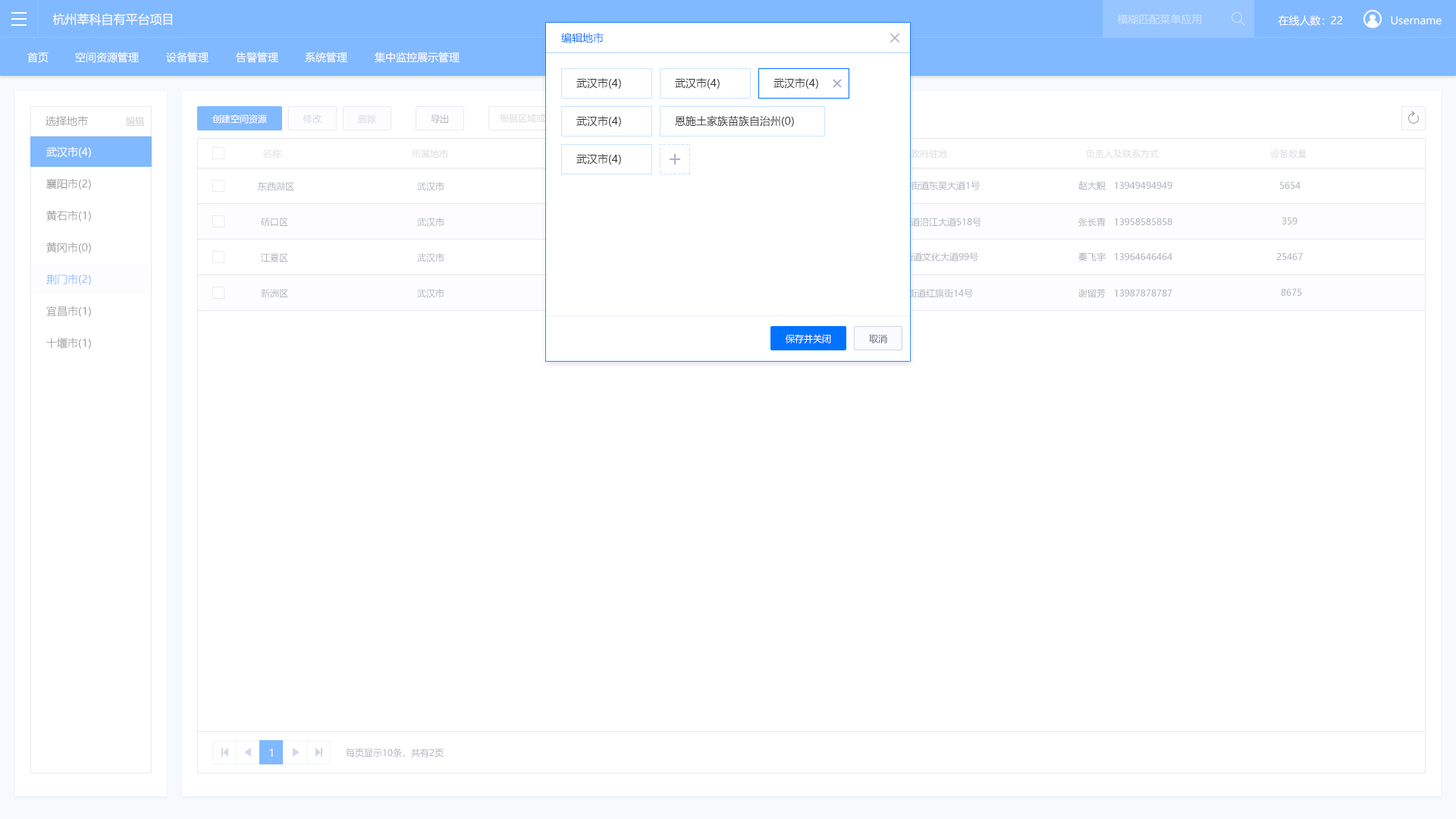
<style>
.page{position:relative;width:1456px;height:819px;background:#ffffff}
.page>*{position:absolute;margin:0}
.t1{font:12.1px "MicrosoftYaHei";color:#ffffff}
.t2{font:10.6px "MicrosoftYaHei";color:#cee4ff}
.t3{font:10.6px "MicrosoftYaHei";color:#ffffff}
.t4{font:10.6px "MicrosoftYaHei";color:#0072ff}
.t5{font:10.6px "MicrosoftYaHei";color:#333333}
.t6{font:9.1px "MicrosoftYaHei";color:#ffffff}
.t7{font:10.6px "MicrosoftYaHei";color:#999999}
.t8{font:9.1px "MicrosoftYaHei";text-decoration:underline}
.t9{font:9.1px "MicrosoftYaHei";color:#d6d9e3}
.t10{font:9.1px "MicrosoftYaHei"}
.t11{font:9.1px "MicrosoftYaHei";color:#b3b3b3}
.t12{font:9.1px "MicrosoftYaHei";color:#dcdde1}
.t13{font:9.1px "MicrosoftYaHei";color:#acb2bb}
.t14{font:10.6px "MicrosoftYaHei";color:#80b9ff}
.t15{font:9.1px "MicrosoftYaHei";color:#fefeff}
.t16{font:9.1px "MicrosoftYaHei";color:#596477}
.t17{font:10.6px "MicrosoftYaHei";color:#fefeff}
</style>
<div class="page">
<p class="t1" style="left:52px;top:13px;width:120px;height:13px">杭州莘科自有平台项目</p>
<p class="t2" style="left:1117px;top:14px;width:85px;height:11px">模糊匹配菜单应用</p>
<p class="t3" style="left:1278px;top:15px;width:46px;height:11px">在线人数：</p>
<p class="t3" style="left:1331px;top:16px;width:11px;height:8px">22</p>
<p class="t3" style="left:1391px;top:16px;width:51px;height:9px">Username</p>
<p class="t4" style="left:561px;top:33px;width:43px;height:10px">编辑地市</p>
<p class="t3" style="left:27px;top:52px;width:22px;height:11px">首页</p>
<p class="t3" style="left:75px;top:52px;width:64px;height:11px">空间资源管理</p>
<p class="t3" style="left:166px;top:52px;width:43px;height:11px">设备管理</p>
<p class="t3" style="left:236px;top:52px;width:42px;height:11px">告警管理</p>
<p class="t3" style="left:305px;top:52px;width:42px;height:11px">系统管理</p>
<p class="t3" style="left:375px;top:52px;width:85px;height:11px">集中监控展示管理</p>
<p class="t5" style="left:576px;top:77px;width:45px;height:12px">武汉市(4)</p>
<p class="t5" style="left:675px;top:77px;width:45px;height:12px">武汉市(4)</p>
<p class="t5" style="left:773px;top:77px;width:45px;height:12px">武汉市(4)</p>
<p class="t6" style="left:212px;top:114px;width:55px;height:10px">创建空间资源</p>
<p class="t7" style="left:45px;top:115px;width:43px;height:12px">选择地市</p>
<p class="t8" style="left:125px;top:116px;width:19px;height:10px">编辑</p>
<p class="t9" style="left:303px;top:115px;width:19px;height:9px">修改</p>
<p class="t10" style="left:358px;top:115px;width:18px;height:9px">删除</p>
<p class="t11" style="left:431px;top:115px;width:17px;height:9px">导出</p>
<p class="t5" style="left:576px;top:115px;width:45px;height:12px">武汉市(4)</p>
<p class="t5" style="left:675px;top:115px;width:119px;height:12px">恩施土家族苗族自治州(0)</p>
<p class="t3" style="left:46px;top:146px;width:45px;height:12px">武汉市(4)</p>
<p class="t12" style="left:263px;top:149px;width:18px;height:9px">名称</p>
<p class="t12" style="left:412px;top:149px;width:36px;height:9px">所属地市</p>
<p class="t12" style="left:911px;top:149px;width:36px;height:9px">政府驻地</p>
<p class="t12" style="left:1086px;top:149px;width:73px;height:9px">负责人及联系方式</p>
<p class="t12" style="left:1270px;top:149px;width:37px;height:9px">设备数量</p>
<p class="t5" style="left:576px;top:153px;width:45px;height:12px">武汉市(4)</p>
<p class="t7" style="left:46px;top:178px;width:45px;height:12px">襄阳市(2)</p>
<p class="t13" style="left:258px;top:182px;width:36px;height:9px">东西湖区</p>
<p class="t13" style="left:417px;top:181px;width:27px;height:10px">武汉市</p>
<p class="t13" style="left:883px;top:180px;width:97px;height:10px">吴家山街道东吴大道1号</p>
<p class="t13" style="left:1078px;top:181px;width:94px;height:9px">赵大鲵   13949494949</p>
<p class="t13" style="left:1280px;top:181px;width:21px;height:8px">5654</p>
<p class="t7" style="left:46px;top:210px;width:45px;height:11px">黄石市(1)</p>
<p class="t13" style="left:261px;top:218px;width:27px;height:9px">硚口区</p>
<p class="t13" style="left:417px;top:217px;width:27px;height:10px">武汉市</p>
<p class="t13" style="left:883px;top:218px;width:98px;height:9px">荣华街道沿江大道518号</p>
<p class="t13" style="left:1078px;top:218px;width:94px;height:9px">张长青   13958585858</p>
<p class="t13" style="left:1282px;top:217px;width:15px;height:7px">359</p>
<p class="t7" style="left:46px;top:242px;width:45px;height:11px">黄冈市(0)</p>
<p class="t13" style="left:261px;top:253px;width:27px;height:9px">江夏区</p>
<p class="t13" style="left:417px;top:253px;width:27px;height:9px">武汉市</p>
<p class="t13" style="left:886px;top:253px;width:92px;height:9px">纸坊街道文化大道99号</p>
<p class="t13" style="left:1078px;top:253px;width:94px;height:9px">秦飞宇   13964646464</p>
<p class="t13" style="left:1276px;top:253px;width:27px;height:7px">25467</p>
<p class="t14" style="left:46px;top:274px;width:45px;height:11px">荆门市(2)</p>
<p class="t13" style="left:261px;top:289px;width:27px;height:9px">新洲区</p>
<p class="t13" style="left:417px;top:288px;width:27px;height:10px">武汉市</p>
<p class="t13" style="left:890px;top:288px;width:83px;height:10px">邾城街道红旗街14号</p>
<p class="t13" style="left:1078px;top:289px;width:94px;height:9px">谢留芳   13987878787</p>
<p class="t13" style="left:1281px;top:288px;width:21px;height:8px">8675</p>
<p class="t7" style="left:46px;top:306px;width:45px;height:11px">宜昌市(1)</p>
<p class="t7" style="left:46px;top:337px;width:45px;height:12px">十堰市(1)</p>
<p class="t15" style="left:786px;top:334px;width:45px;height:10px">保存并关闭</p>
<p class="t16" style="left:869px;top:334px;width:18px;height:10px">取消</p>
<p class="t17" style="left:269px;top:748px;width:4px;height:9px">1</p>
<p class="t13" style="left:346px;top:748px;width:98px;height:10px">每页显示10条，共有2页</p>
</div>
